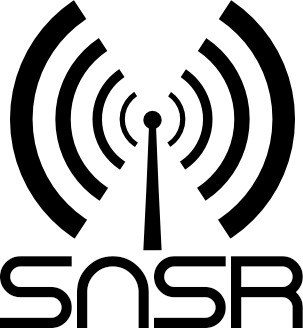
<style>
.page{position:relative;width:303px;height:328px;background:#ffffff}
.page>*{position:absolute;margin:0}
.t1{font:105px "ElectromagneticLungs";color:#000000}
</style>
<div class="page">
<p class="t1" style="left:0px;top:256px;width:303px;height:72px">SNSR</p>
</div>
